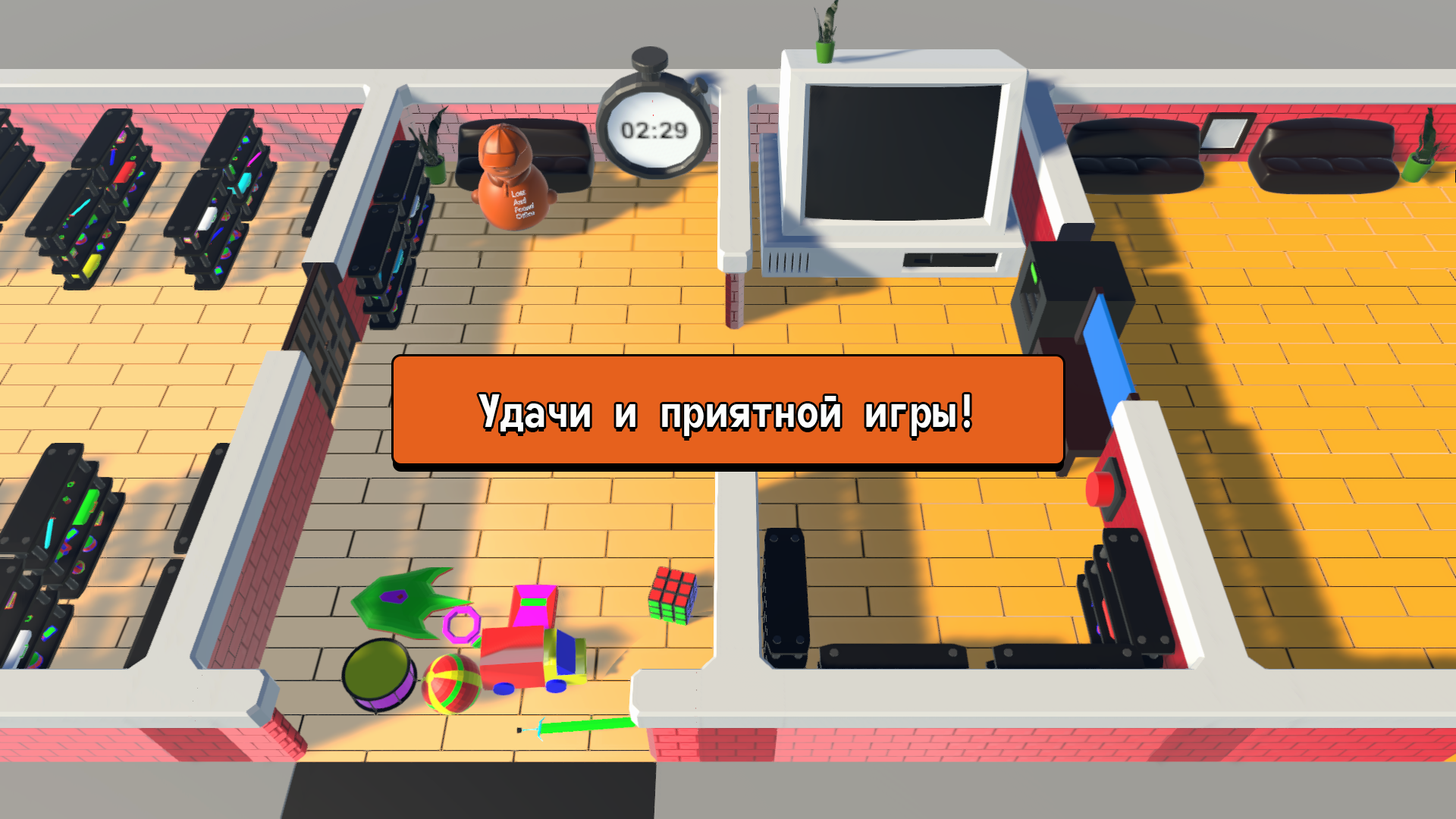
<style>
.page{position:relative;width:1456px;height:819px}
.page>*{position:absolute;margin:0}
.t1{font:56.9px "MonofontoRUSBYMelman-Regular";color:#fdfefd}
</style>
<div class="page">
<p class="t1" style="left:479px;top:394px;width:491px;height:42px">Удачи и приятной игры!</p>
</div>
